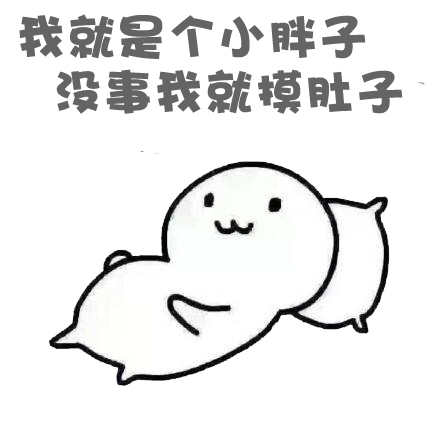
<style>
.page{position:relative;width:440px;height:440px;background:#ffffff}
.page>*{position:absolute;margin:0}
.t1{font:48px "DFPHaiBaoW12";letter-spacing:0.05em;color:#656464}
</style>
<div class="page">
<p class="t1" style="left:19px;top:14px;width:347px;height:45px">我就是个小胖子</p>
<p class="t1" style="left:56px;top:69px;width:347px;height:45px">没事我就摸肚子</p>
</div>
